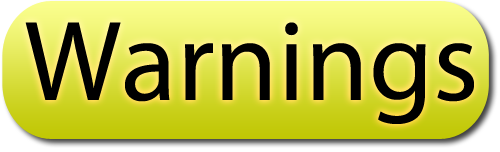
<style>
.page{position:relative;width:500px;height:152px}
.page>*{position:absolute;margin:0}
.t1{font:115px "MyriadPro-Regular";color:#000000}
</style>
<div class="page">
<p class="t1" style="left:25px;top:22px;width:449px;height:102px">Warnings</p>
</div>
